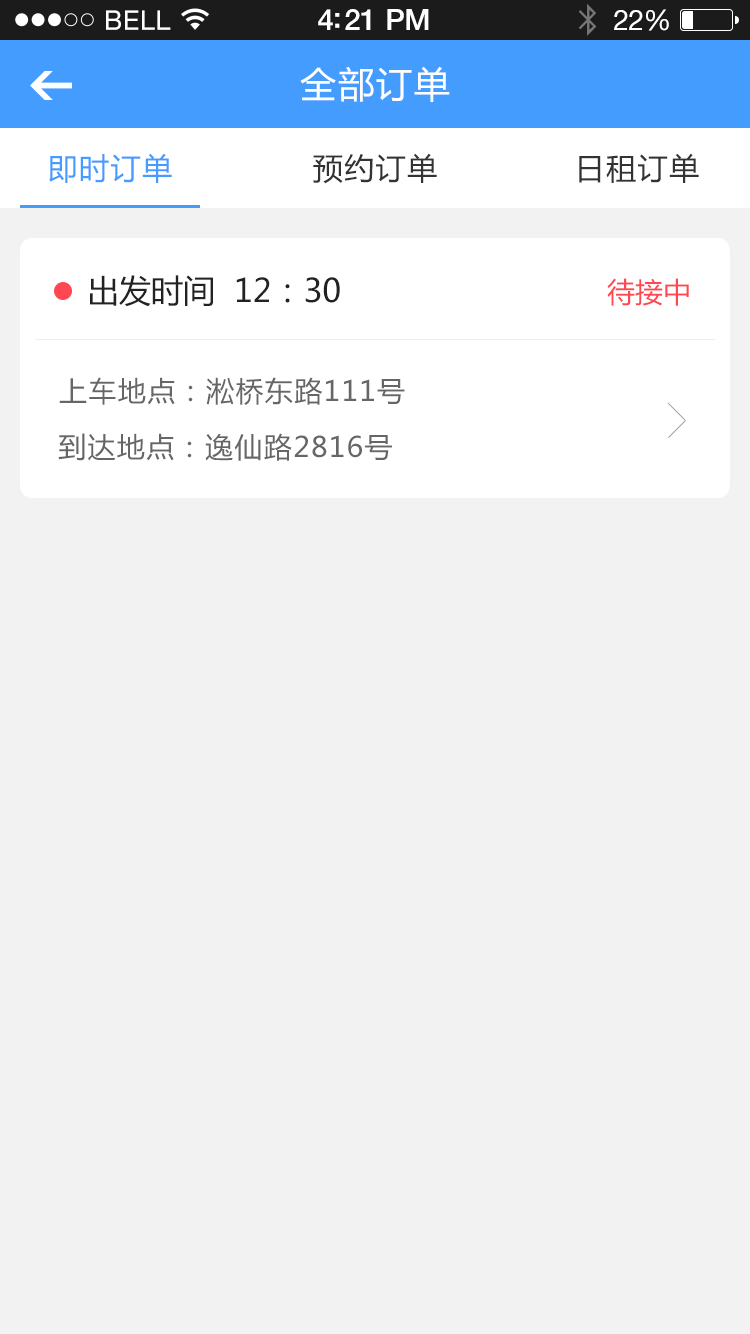
<style>
.page{position:relative;width:750px;height:1334px;background:#f2f2f2}
.page>*{position:absolute;margin:0}
.t1{font:36px "MicrosoftYaHei";letter-spacing:0.05em;color:#ffffff}
.t2{font:30px "MicrosoftYaHei";letter-spacing:0.05em;color:#449cff}
.t3{font:30px "MicrosoftYaHei";letter-spacing:0.05em;color:#333333}
.t4{font:32px "MicrosoftYaHei";color:#222222}
.t5{font:28px "MicrosoftYaHei";color:#fe4750}
.t6{font:28px "MicrosoftYaHei";letter-spacing:0.05em;color:#666666}
</style>
<div class="page">
<p class="t1" style="left:300px;top:66px;width:150px;height:36px">全部订单</p>
<p class="t2" style="left:49px;top:153px;width:123px;height:30px">即时订单</p>
<p class="t3" style="left:313px;top:153px;width:124px;height:31px">预约订单</p>
<p class="t3" style="left:579px;top:153px;width:120px;height:30px">日租订单</p>
<p class="t4" style="left:90px;top:275px;width:250px;height:32px">出发时间  12：30</p>
<p class="t5" style="left:607px;top:278px;width:82px;height:28px">待接中</p>
<p class="t6" style="left:59px;top:377px;width:346px;height:28px">上车地点：淞桥东路111号</p>
<p class="t6" style="left:58px;top:433px;width:334px;height:28px">到达地点：逸仙路2816号</p>
</div>
